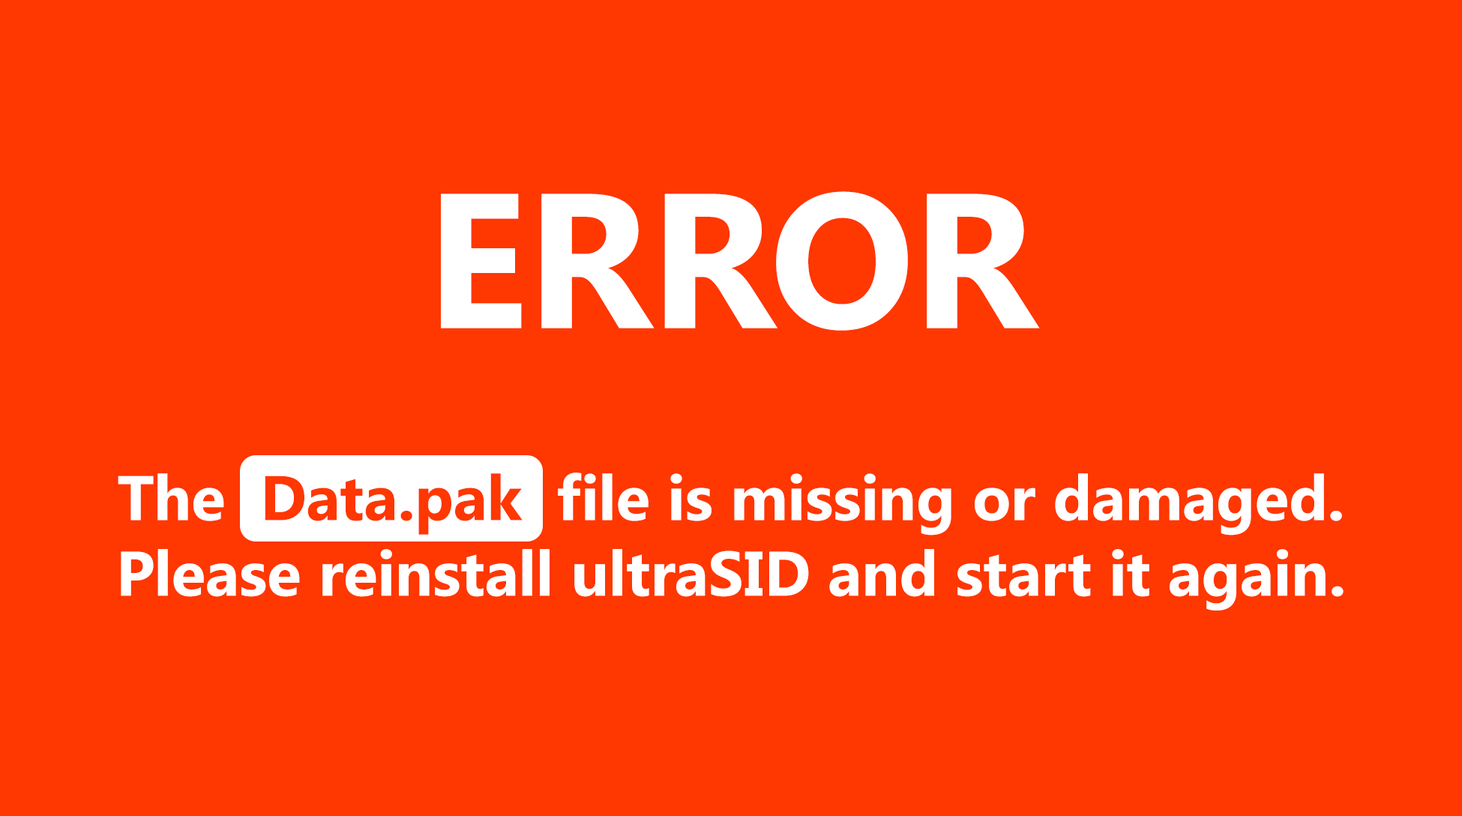
<style>
.page{position:relative;width:1462px;height:816px;background:#ff3700}
.page>*{position:absolute;margin:0}
.t1{font:191.3px "Ebrima-Bold";color:#ffffff;text-transform:uppercase}
.t2{font:62.9px "Ebrima-Bold";color:#ffffff}
.t3{font:62.9px "Ebrima-Bold";color:#ff3700}
</style>
<div class="page">
<p class="t1" style="left:441px;top:191px;width:599px;height:140px">ERROR</p>
<p class="t2" style="left:118px;top:472px;width:1225px;height:138px;text-align:center">The  Data.pak  file is missing or damaged.<br>Please reinstall ultraSID and start it again.</p>
<p class="t3" style="left:265px;top:473px;width:258px;height:62px">Data.pak</p>
</div>
